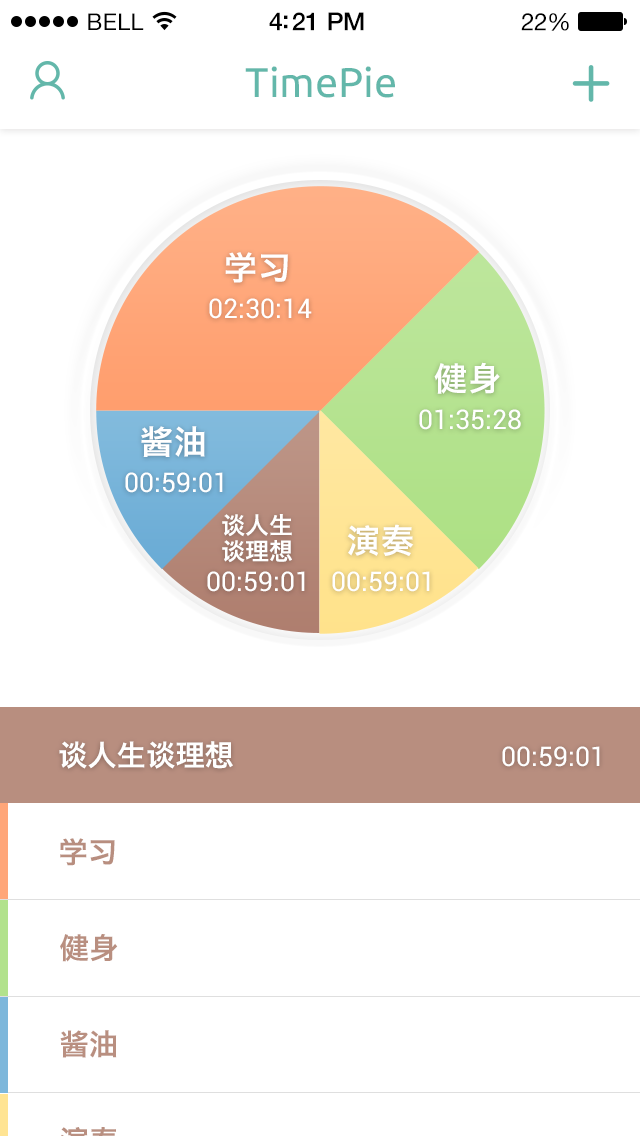
<style>
.page{position:relative;width:640px;height:1136px;background:#ffffff}
.page>*{position:absolute;margin:0}
.t1{font:23px "HelveticaNeue";letter-spacing:0.02em;color:#000000}
.t2{font:25px "HelveticaNeue-Medium";letter-spacing:-0.02em;color:#000000}
.t3{font:24px "HelveticaNeue";letter-spacing:-0.02em;color:#000000}
.t4{font:41.4px "Ubuntu-Regular";color:#63b7aa}
.t5{font:33px "HiraginoSansGB-W6";color:#ffffff}
.t6{font:26.6px "Roboto-Regular";color:#ffffff}
.t7{font:23.8px "HiraginoSansGB-W6";color:#ffffff}
.t8{font:29.4px "HiraginoSansGB-W6";color:#ffffff}
.t9{font:29.4px "HiraginoSansGB-W6";color:#b88e7f}
.t10{font:29.4px "HiraginoSansGB-W6";color:#b98f80}
</style>
<div class="page">
<p class="t1" style="left:88px;top:13px;width:56px;height:17px">BELL</p>
<p class="t2" style="left:269px;top:12px;width:95px;height:19px">4:21 PM</p>
<p class="t3" style="left:521px;top:13px;width:48px;height:18px">22%</p>
<p class="t4" style="left:245px;top:66px;width:150px;height:32px">TimePie</p>
<p class="t5" style="left:225px;top:252px;width:63px;height:31px">学习</p>
<p class="t6" style="left:209px;top:298px;width:103px;height:21px">02:30:14</p>
<p class="t5" style="left:434px;top:362px;width:66px;height:32px">健身</p>
<p class="t6" style="left:419px;top:409px;width:102px;height:21px">01:35:28</p>
<p class="t5" style="left:141px;top:426px;width:64px;height:31px">酱油</p>
<p class="t6" style="left:125px;top:472px;width:98px;height:21px">00:59:01</p>
<p class="t7" style="left:222px;top:514px;width:70px;height:23px">谈人生</p>
<p class="t5" style="left:347px;top:524px;width:67px;height:32px">演奏</p>
<p class="t7" style="left:222px;top:540px;width:70px;height:23px">谈理想</p>
<p class="t6" style="left:207px;top:571px;width:98px;height:21px">00:59:01</p>
<p class="t6" style="left:332px;top:571px;width:98px;height:21px">00:59:01</p>
<p class="t8" style="left:59px;top:741px;width:174px;height:28px">谈人生谈理想</p>
<p class="t6" style="left:502px;top:746px;width:98px;height:21px">00:59:01</p>
<p class="t9" style="left:60px;top:838px;width:55px;height:28px">学习</p>
<p class="t10" style="left:60px;top:934px;width:58px;height:28px">健身</p>
<p class="t10" style="left:60px;top:1030px;width:57px;height:28px">酱油</p>
</div>
